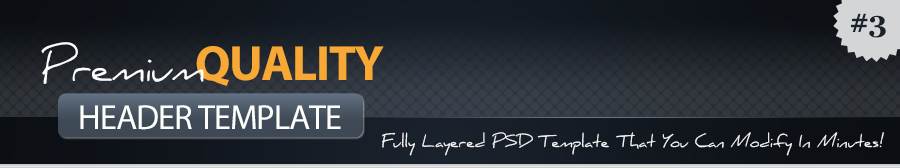
<style>
.page{position:relative;width:900px;height:168px}
.page>*{position:absolute;margin:0}
.t1{font:30px "Georgia-Bold";letter-spacing:-0.05em;color:#19212b}
.t2{font:42.6px "Daniel";letter-spacing:-0.03em;color:#fffeff}
.t3{font:49.7px "MyriadPro-Bold";letter-spacing:-0.03em;color:#f8a935;text-transform:uppercase}
.t4{font:34.8px "MyriadPro-Regular";letter-spacing:-0.03em;color:#fdfffc;text-transform:uppercase}
.t5{font:16px "Daniel";color:#fcfcfc}
</style>
<div class="page">
<p class="t1" style="left:851px;top:13px;width:35px;height:25px">#3</p>
<p class="t2" style="left:41px;top:42px;width:163px;height:42px">Premium</p>
<p class="t3" style="left:196px;top:46px;width:188px;height:40px">Quality</p>
<p class="t4" style="left:80px;top:105px;width:261px;height:25px">header Template</p>
<p class="t5" style="left:382px;top:132px;width:502px;height:24px">Fully Layered PSD Template That You Can Modify In Minutes!</p>
</div>
